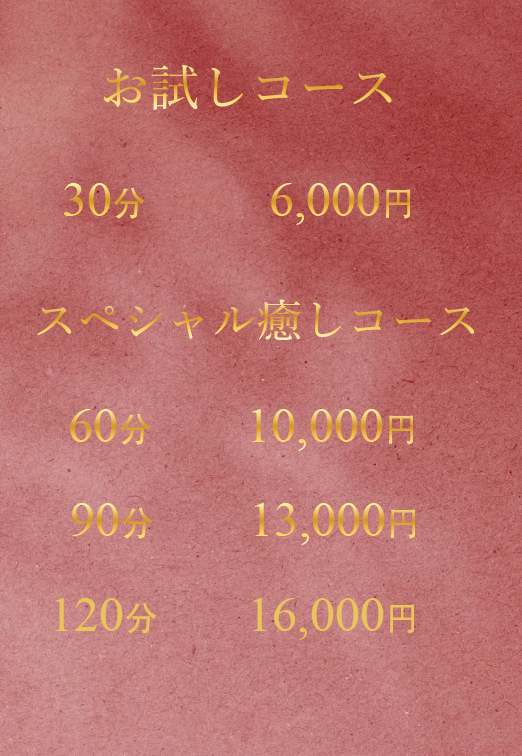
<style>
.page{position:relative;width:522px;height:756px}
.page>*{position:absolute;margin:0}
.t1{font:50px "YuMin-Medium"}
.t2{font:50px "TimesNewRomanPSMT"}
.t3{font:34px "AdobeHeitiStd-Regular"}
.t4{font:44.8px "YuMin-Medium"}
.t5{font:50px "AdobeHeitiStd-Regular"}
.t6{font:50px "TimesNewRomanPSMT";color:#e9c45a}
.t7{font:34px "AdobeHeitiStd-Regular";color:#e9c45a}
</style>
<div class="page">
<p class="t1" style="left:103px;top:65px;width:289px;height:45px">お試しコース</p>
<p class="t2" style="left:64px;top:183px;width:347px;height:42px">30<span class="t3">分  　　</span>6,000<span class="t3">円</span></p>
<p class="t4" style="left:37px;top:299px;width:438px;height:41px">スペシャル癒しコース</p>
<p class="t2" style="left:70px;top:409px;width:344px;height:42px"><span class="t5">  </span>60<span class="t3">分　    </span>10,000<span class="t3">円</span></p>
<p class="t2" style="left:72px;top:503px;width:344px;height:42px">90<span class="t3">分　    </span>13,000<span class="t3">円</span></p>
<p class="t6" style="left:55px;top:598px;width:360px;height:42px">120<span class="t7">分        </span>16,000<span class="t7">円</span></p>
</div>
